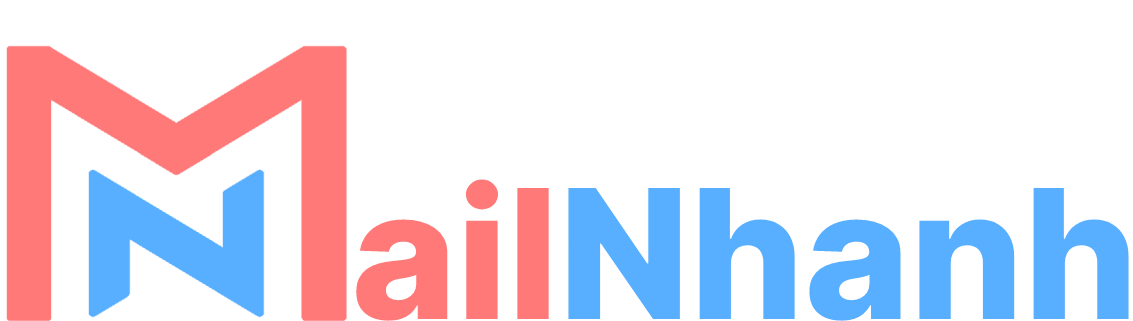
<style>
.page{position:relative;width:1133px;height:321px;background:#ffffff}
.page>*{position:absolute;margin:0}
.t1{font:180px "Inter-ExtraBold";color:#59afff}
.t2{font:180px "Inter-ExtraBold";color:#ff7979}
</style>
<div class="page">
<p class="t1" style="left:356px;top:179px;width:773px;height:142px"><span class="t2">ail</span>Nhanh</p>
</div>
